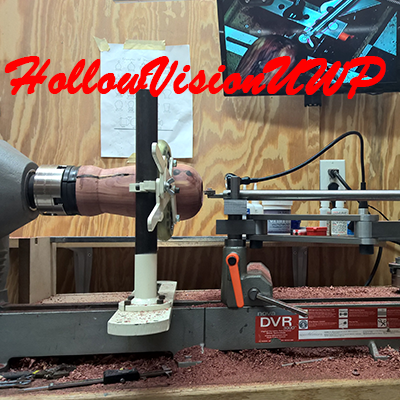
<style>
.page{position:relative;width:400px;height:400px}
.page>*{position:absolute;margin:0}
.t1{font:58.3px "BrushScriptMT";color:#ff0000;font-weight:bold}
</style>
<div class="page">
<p class="t1" style="left:4px;top:56px;width:382px;height:43px">HollowVisionUWP</p>
</div>
